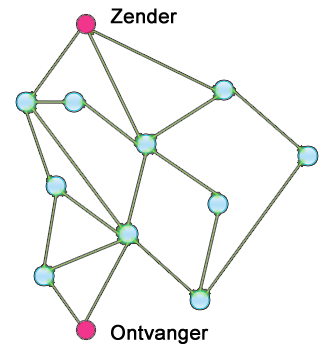
<style>
.page{position:relative;width:335px;height:353px;background:#ffffff}
.page>*{position:absolute;margin:0}
.t1{font:19.9px "ArialMT";color:#000000;font-weight:bold}
</style>
<div class="page">
<p class="t1" style="left:110px;top:8px;width:67px;height:16px">Zender</p>
<p class="t1" style="left:111px;top:324px;width:98px;height:20px">Ontvanger</p>
</div>
